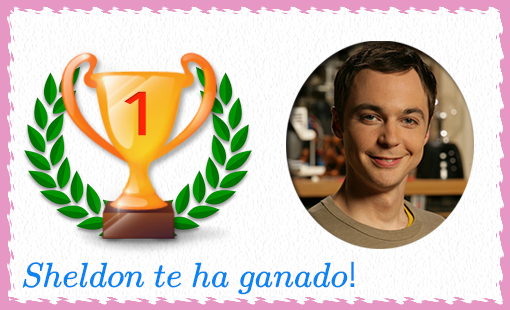
<style>
.page{position:relative;width:510px;height:310px;background:#ffffff}
.page>*{position:absolute;margin:0}
.t1{font:34.9px "MathJax_Math-Regular";color:#0a83f3}
.t2{font:34.9px "AnjaliOldLipi";color:#0a83f3}
</style>
<div class="page">
<p class="t1" style="left:22px;top:261px;width:333px;height:34px">Sheldon te ha ganado<span class="t2">!</span></p>
</div>
